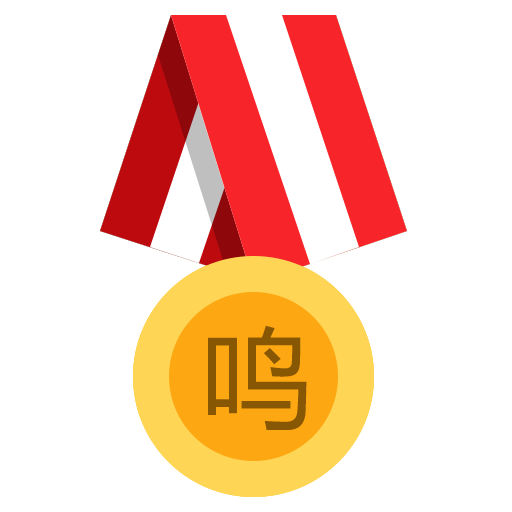
<style>
.page{position:relative;width:512px;height:512px;background:#ffffff}
.page>*{position:absolute;margin:0}
.t1{font:110px "MicrosoftYaHeiUI";color:#885703}
</style>
<div class="page">
<p class="t1" style="left:208px;top:325px;width:99px;height:105px">鸣</p>
</div>
